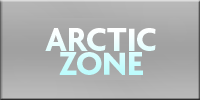
<style>
.page{position:relative;width:200px;height:100px}
.page>*{position:absolute;margin:0}
.t1{font:35px/24px "Agenda-Bold";letter-spacing:-0.015em}
</style>
<div class="page">
<p class="t1" style="left:45px;top:28px;width:111px;height:47px;text-align:center">ARCTIC<br>ZONE</p>
</div>
